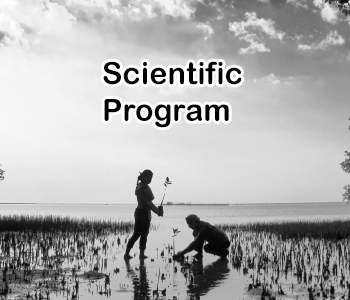
<style>
.page{position:relative;width:350px;height:300px}
.page>*{position:absolute;margin:0}
.t1{font:30.6px "ArialRoundedMTBold";letter-spacing:0.005em;color:#020202}
</style>
<div class="page">
<p class="t1" style="left:103px;top:61px;width:139px;height:67px">Scientific<br>Program</p>
</div>
